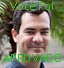
<style>
.page{position:relative;width:64px;height:68px}
.page>*{position:absolute;margin:0}
.t1{font:12.4px "Calibri";color:#3ec918}
.t2{font:12.4px "Calibri";color:#18c918}
</style>
<div class="page">
<p class="t1" style="left:10px;top:1px;width:43px;height:9px">Você Foi</p>
<p class="t2" style="left:3px;top:54px;width:58px;height:8px">APROVADO</p>
</div>
